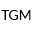
<style>
.page{position:relative;width:32px;height:32px;background:#ffffff}
.page>*{position:absolute;margin:0}
.t1{font:14px "Lato-Regular";color:#000000}
</style>
<div class="page">
<p class="t1" style="left:1px;top:10px;width:30px;height:10px">TGM</p>
</div>
